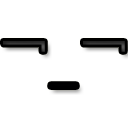
<style>
.page{position:relative;width:128px;height:128px;background:#ffffff}
.page>*{position:absolute;margin:0}
.t1{font:52px "SimHei";color:#000000}
</style>
<div class="page">
<p class="t1" style="left:3px;top:41px;width:122px;height:46px">￢_￢</p>
</div>
